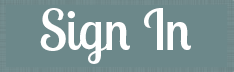
<style>
.page{position:relative;width:234px;height:72px;background:#6c888a}
.page>*{position:absolute;margin:0}
.t1{font:55px "LobsterTwo";color:#ffffff}
</style>
<div class="page">
<p class="t1" style="left:40px;top:8px;width:151px;height:56px">Sign In</p>
</div>
